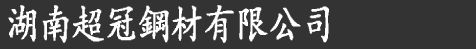
<style>
.page{position:relative;width:476px;height:49px;background:#333333}
.page>*{position:absolute;margin:0}
.t1{font:41.5px "¿¬Ìå";color:#fefefe;font-weight:bold;scale:0.79 1}
</style>
<div class="page">
<p class="t1" style="left:8px;top:5px;width:321px;height:38px">湖南超冠鋼材有限公司</p>
</div>
